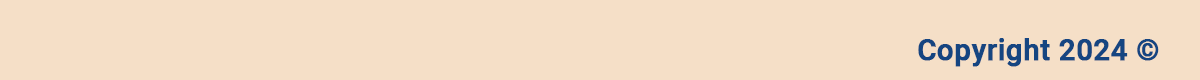
<style>
.page{position:relative;width:1200px;height:80px;background:#f5dfc7}
.page>*{position:absolute;margin:0}
.t1{font:29.2px "Roboto-Medium";color:#154581;font-weight:bold}
</style>
<div class="page">
<p class="t1" style="left:918px;top:38px;width:241px;height:29px">Copyright 2024 ©</p>
</div>
